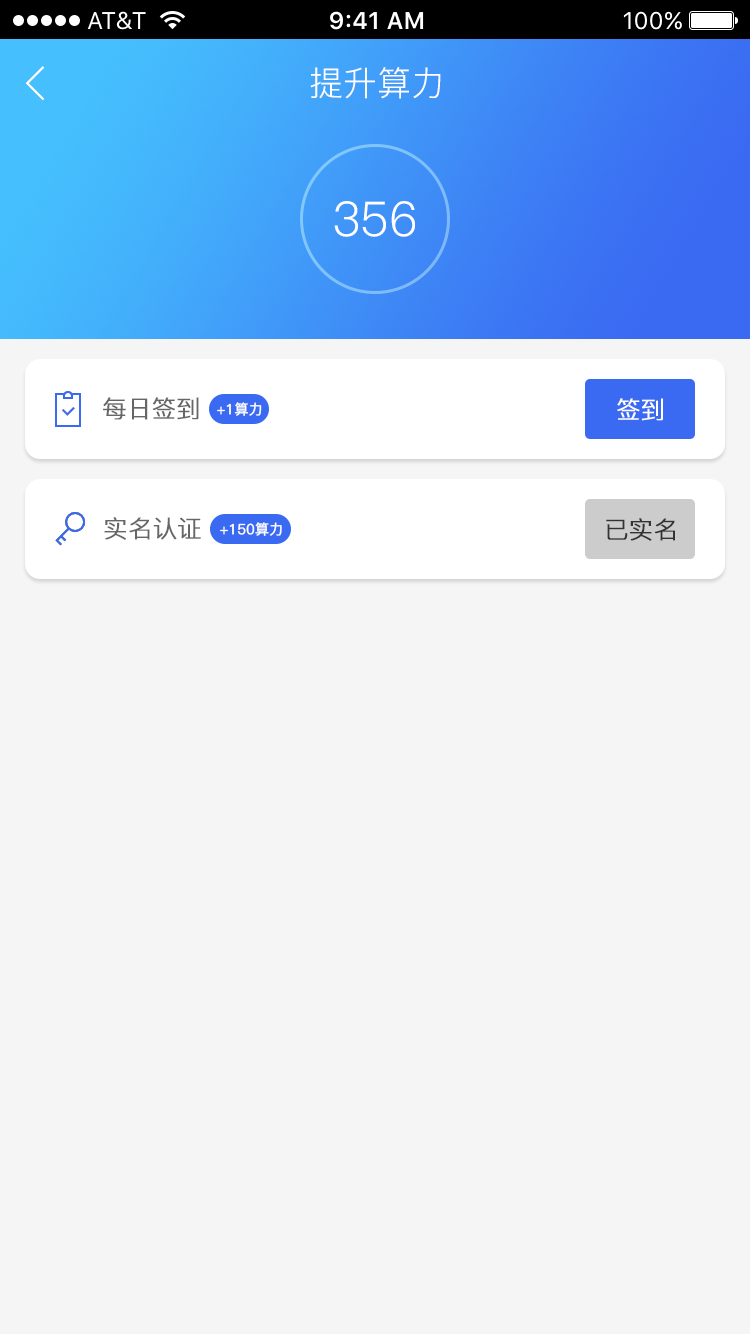
<style>
.page{position:relative;width:750px;height:1334px;background:#f5f5f5}
.page>*{position:absolute;margin:0}
.t1{font:34px "PingFang-SC-Regular";color:#ffffff}
.t2{font:48px "PingFang-SC-Regular";color:#ffffff}
.t3{font:24px "PingFang-SC-Regular";color:#666666;font-weight:bold}
.t4{font:24px "PingFang-SC-Regular";color:#ffffff;font-weight:bold}
.t5{font:14px "PingFang-SC-Regular";color:#ffffff;font-weight:bold}
.t6{font:24px "PingFang-SC-Regular";color:#333333;font-weight:bold}
</style>
<div class="page">
<p class="t1" style="left:310px;top:67px;width:131px;height:32px">提升算力</p>
<p class="t2" style="left:334px;top:201px;width:81px;height:36px">356</p>
<p class="t3" style="left:103px;top:397px;width:96px;height:23px">每日签到</p>
<p class="t4" style="left:617px;top:398px;width:46px;height:23px">签到</p>
<p class="t5" style="left:217px;top:402px;width:45px;height:14px">+1算力</p>
<p class="t3" style="left:104px;top:517px;width:97px;height:23px">实名认证</p>
<p class="t6" style="left:606px;top:518px;width:69px;height:23px">已实名</p>
<p class="t5" style="left:220px;top:522px;width:62px;height:14px">+150算力</p>
</div>
